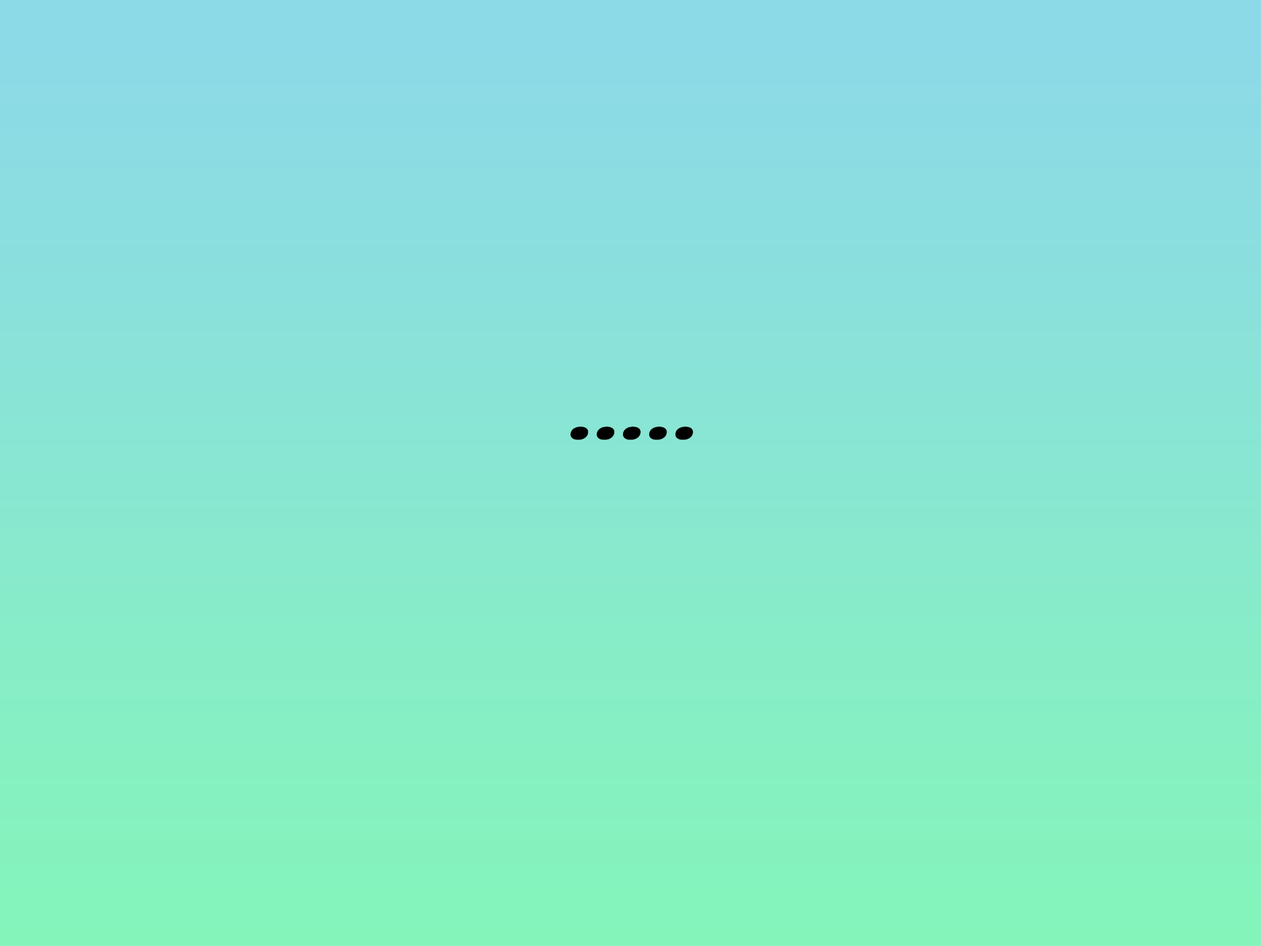
<style>
.page{position:relative;width:1261px;height:946px}
.page>*{position:absolute;margin:0}
.t1{font:60.1px "Broadway";letter-spacing:0.06em;color:#000000;font-style:italic}
</style>
<div class="page">
<p class="t1" style="left:571px;top:426px;width:122px;height:14px">.....</p>
</div>
